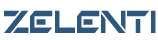
<style>
.page{position:relative;width:158px;height:40px;background:#ffffff}
.page>*{position:absolute;margin:0}
.t1{font:44.6px "TechnoHideo";color:#2e577d;scale:0.79 1}
</style>
<div class="page">
<p class="t1" style="left:4px;top:10px;width:152px;height:23px">ZelenTi</p>
</div>
